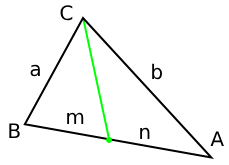
<style>
.page{position:relative;width:229px;height:165px;background:#ffffff}
.page>*{position:absolute;margin:0}
.t1{font:20px "DejaVuSans";color:#000000}
</style>
<div class="page">
<p class="t1" style="left:60px;top:5px;width:13px;height:16px">C</p>
<p class="t1" style="left:30px;top:64px;width:10px;height:13px">a</p>
<p class="t1" style="left:152px;top:63px;width:10px;height:17px">b</p>
<p class="t1" style="left:67px;top:112px;width:17px;height:12px">m</p>
<p class="t1" style="left:9px;top:123px;width:11px;height:15px">B</p>
<p class="t1" style="left:140px;top:127px;width:10px;height:12px">n</p>
<p class="t1" style="left:210px;top:131px;width:14px;height:15px">A</p>
</div>
